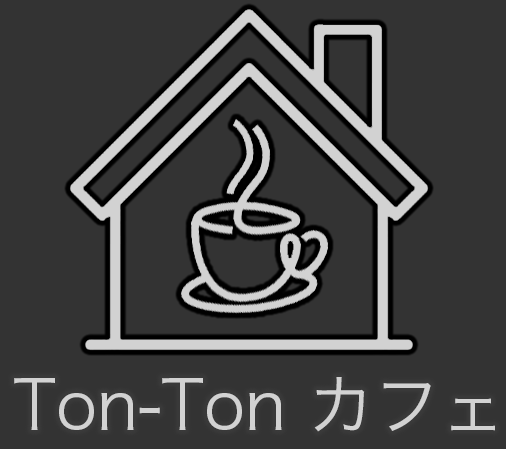
<style>
.page{position:relative;width:506px;height:449px;background:#333333}
.page>*{position:absolute;margin:0}
.t1{font:65.9px "HiraginoSansGB-W3";color:#d2d2d2}
</style>
<div class="page">
<p class="t1" style="left:14px;top:377px;width:481px;height:55px">Ton-Ton カフェ</p>
</div>
